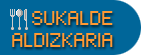
<style>
.page{position:relative;width:142px;height:55px;background:#006699}
.page>*{position:absolute;margin:0}
.t1{font:16px/22px "Standard0755";color:#ff9933}
</style>
<div class="page">
<p class="t1" style="left:12px;top:11px;width:101px;height:36px;text-align:right">SUKALDE<br>ALDIZKARIA</p>
</div>
